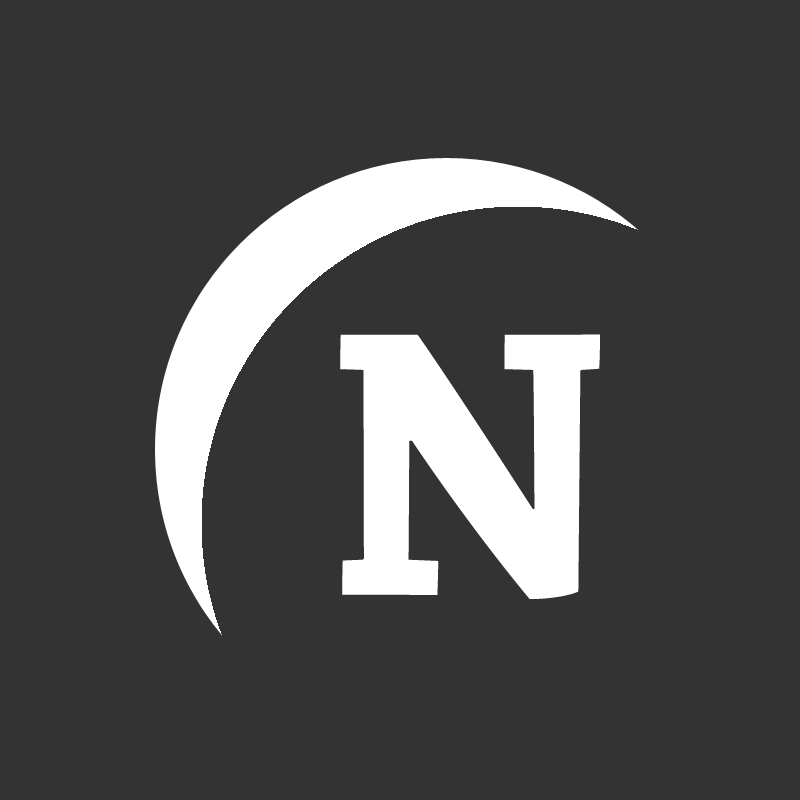
<style>
.page{position:relative;width:800px;height:800px;background:#333333}
.page>*{position:absolute;margin:0}
.t1{font:400px "ChaparralPro-Bold";color:#ffffff}
</style>
<div class="page">
<p class="t1" style="left:340px;top:334px;width:260px;height:265px">N</p>
</div>
